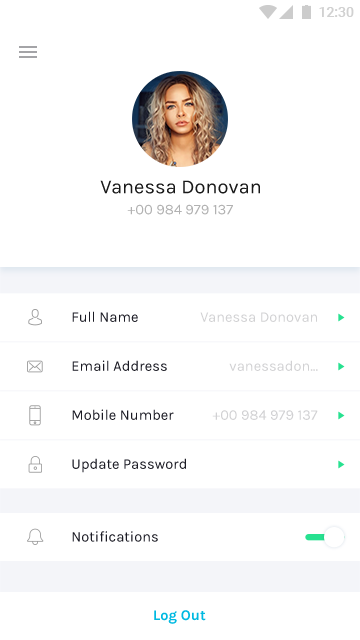
<style>
.page{position:relative;width:360px;height:640px;background:#ffffff}
.page>*{position:absolute;margin:0}
.t1{font:20px "Karla-Regular";color:#191919}
.t2{font:14.7px "Karla-Regular";color:#b2b2b2}
.t3{font:14.7px "Karla-Regular";color:#1b1b24}
.t4{font:14.7px "Karla-Regular";color:#d1d1d3}
.t5{font:14.7px "Karla-Bold";color:#00b9e1}
</style>
<div class="page">
<p class="t1" style="left:100px;top:180px;width:160px;height:14px">Vanessa Donovan</p>
<p class="t2" style="left:127px;top:204px;width:106px;height:11px">+00 984 979 137</p>
<p class="t3" style="left:72px;top:311px;width:66px;height:11px">Full Name</p>
<p class="t4" style="left:200px;top:312px;width:117px;height:10px">Vanessa Donovan</p>
<p class="t3" style="left:72px;top:360px;width:95px;height:11px">Email Address</p>
<p class="t4" style="left:229px;top:360px;width:89px;height:11px">vanessadon...</p>
<p class="t3" style="left:72px;top:409px;width:102px;height:11px">Mobile Number</p>
<p class="t4" style="left:212px;top:410px;width:106px;height:10px">+00 984 979 137</p>
<p class="t3" style="left:72px;top:458px;width:114px;height:15px">Update Password</p>
<p class="t3" style="left:72px;top:531px;width:86px;height:11px">Notifications</p>
<p class="t5" style="left:154px;top:610px;width:52px;height:14px">Log Out</p>
</div>
